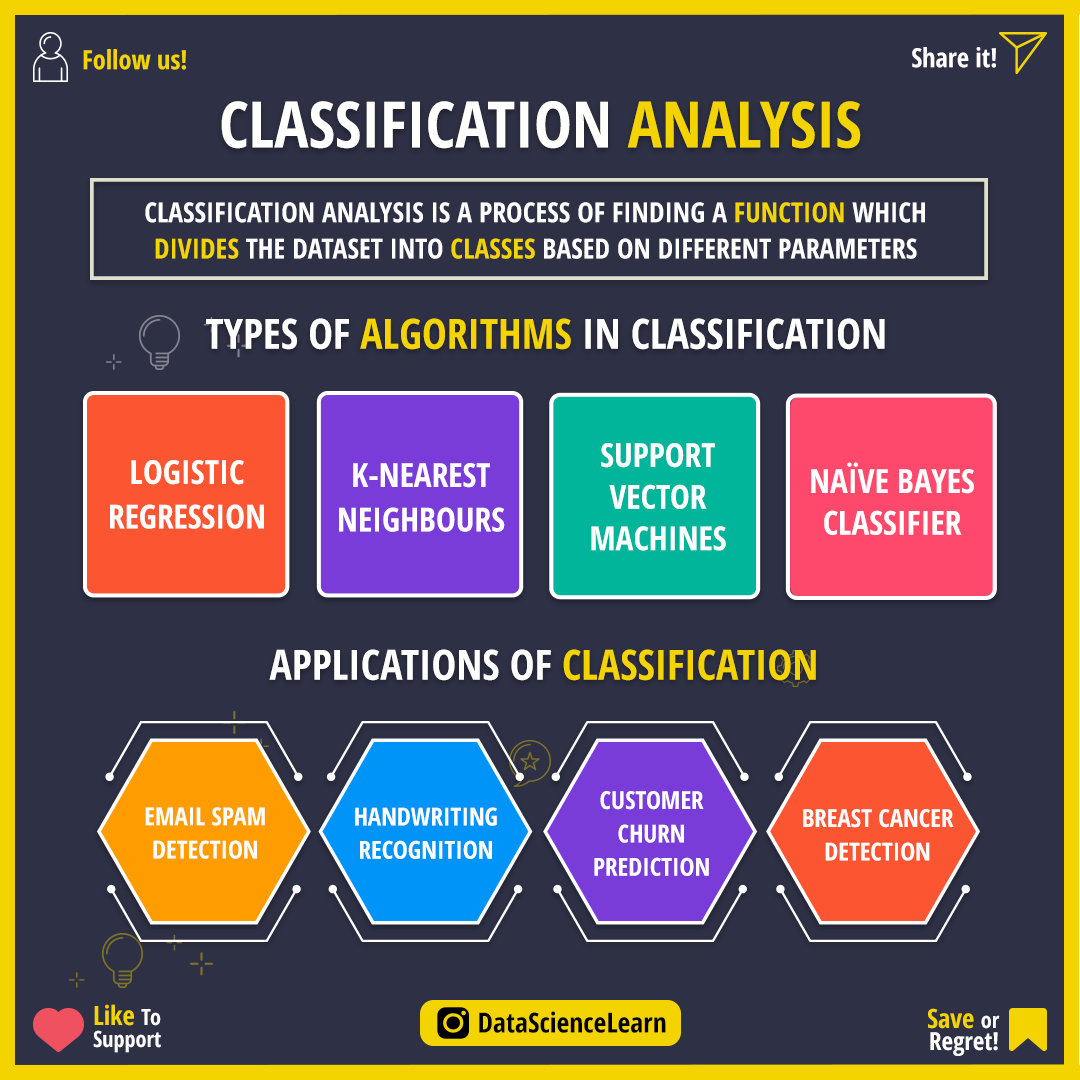
<style>
.page{position:relative;width:1080px;height:1080px;background:#2e3045}
.page>*{position:absolute;margin:0}
.t1{font:26.4px "OpenSans-CondensedBold";color:#f3d400}
.t2{font:26.4px "OpenSans-CondensedBold";color:#ffffff}
.t3{font:63.9px "OpenSans-CondensedBold";color:#fffffe}
.t4{font:63.9px "OpenSans-CondensedBold";color:#f3d400}
.t5{font:27.8px/36.1px "OpenSans-CondensedBold";color:#ffffff}
.t6{font:27.8px/36.1px "OpenSans-CondensedBold";color:#f3d400}
.t7{font:41.7px "OpenSans-CondensedBold";color:#ffffff}
.t8{font:41.7px "OpenSans-CondensedBold";color:#f3d400}
.t9{font:33.3px/41.7px "OpenSans-CondensedBold";color:#ffffff}
.t10{font:33.3px/44.4px "OpenSans-CondensedBold";color:#ffffff}
.t11{font:25px/33.3px "OpenSans-CondensedBold";color:#ffffff}
.t12{font:22.2px/22.2px "OpenSans-CondensedBold";color:#ffffff}
.t13{font:26.4px/22.2px "OpenSans-CondensedBold";color:#f3d400}
.t14{font:27.8px "OpenSans-CondensedBold";color:#000000}
.t15{font:25px/22.2px "OpenSans-CondensedBold";color:#ffffff}
</style>
<div class="page">
<p class="t1" style="left:83px;top:49px;width:103px;height:21px">Follow us!</p>
<p class="t2" style="left:912px;top:47px;width:84px;height:21px">Share it!</p>
<p class="t3" style="left:221px;top:101px;width:640px;height:48px">CLASSIFICATION <span class="t4">ANALYSIS</span></p>
<p class="t5" style="left:145px;top:202px;width:780px;height:57px;text-align:center">CLASSIFICATION ANALYSIS IS A PROCESS OF FINDING A <span class="t6">FUNCTION </span>WHICH<br><span class="t6">DIVIDES </span>THE DATASET INTO <span class="t6">CLASSES </span>BASED ON DIFFERENT PARAMETERS</p>
<p class="t7" style="left:206px;top:318px;width:679px;height:32px">TYPES OF <span class="t8">ALGORITHMS </span>IN CLASSIFICATION</p>
<p class="t9" style="left:591px;top:443px;width:135px;height:108px;text-align:center">SUPPORT<br>VECTOR<br>MACHINES</p>
<p class="t10" style="left:110px;top:460px;width:154px;height:69px;text-align:center">LOGISTIC<br>REGRESSION</p>
<p class="t9" style="left:811px;top:462px;width:163px;height:73px;text-align:center">NAÏVE BAYES<br>CLASSIFIER</p>
<p class="t10" style="left:339px;top:463px;width:166px;height:69px;text-align:center">K-NEAREST<br>NEIGHBOURS</p>
<p class="t7" style="left:269px;top:649px;width:547px;height:32px">APPLICATIONS OF <span class="t8">CLASSIFICATION</span></p>
<p class="t11" style="left:594px;top:791px;width:115px;height:85px;text-align:center">CUSTOMER<br>CHURN<br>PREDICTION</p>
<p class="t11" style="left:145px;top:807px;width:120px;height:52px;text-align:center">EMAIL SPAM<br>DETECTION</p>
<p class="t11" style="left:355px;top:807px;width:142px;height:52px;text-align:center">HANDWRITING<br>RECOGNITION</p>
<p class="t11" style="left:803px;top:809px;width:151px;height:52px;text-align:center">BREAST CANCER<br>DETECTION</p>
<p class="t12" style="left:93px;top:1004px;width:68px;height:49px"><span class="t13">Like </span>To<br>Support</p>
<p class="t14" style="left:479px;top:1011px;width:187px;height:22px">DataScienceLearn</p>
<p class="t15" style="left:928px;top:1008px;width:72px;height:48px;text-align:right"><span class="t13">Save </span><span class="t12">or<br></span>Regret!</p>
</div>
